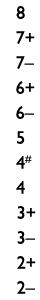
<style>
.page{position:relative;width:40px;height:300px;background:#ffffff}
.page>*{position:absolute;margin:0}
.t1{font:18px "GillSansMT";color:#000000}
</style>
<div class="page">
<p class="t1" style="left:16px;top:6px;width:9px;height:13px">8</p>
<p class="t1" style="left:16px;top:31px;width:19px;height:13px">7+</p>
<p class="t1" style="left:16px;top:56px;width:18px;height:13px">7–</p>
<p class="t1" style="left:16px;top:81px;width:19px;height:13px">6+</p>
<p class="t1" style="left:16px;top:106px;width:18px;height:13px">6–</p>
<p class="t1" style="left:17px;top:131px;width:8px;height:13px">5</p>
<p class="t1" style="left:16px;top:155px;width:16px;height:14px">4#</p>
<p class="t1" style="left:16px;top:181px;width:9px;height:13px">4</p>
<p class="t1" style="left:17px;top:206px;width:19px;height:13px">3+</p>
<p class="t1" style="left:17px;top:231px;width:18px;height:13px">3–</p>
<p class="t1" style="left:17px;top:256px;width:19px;height:13px">2+</p>
<p class="t1" style="left:17px;top:281px;width:18px;height:13px">2–</p>
</div>
